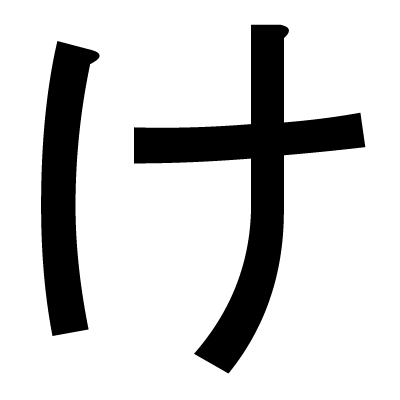
<style>
.page{position:relative;width:400px;height:400px;background:#ffffff}
.page>*{position:absolute;margin:0}
.t1{font:416.7px "MS-PGothic";color:#000000}
</style>
<div class="page">
<p class="t1" style="left:41px;top:24px;width:325px;height:350px">け</p>
</div>
